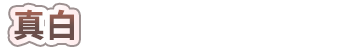
<style>
.page{position:relative;width:360px;height:50px;background:#ffffff}
.page>*{position:absolute;margin:0}
.t1{font:32px "SourceHanSansSC-Bold";font-weight:bold}
</style>
<div class="page">
<p class="t1" style="left:14px;top:9px;width:60px;height:31px">真白</p>
</div>
